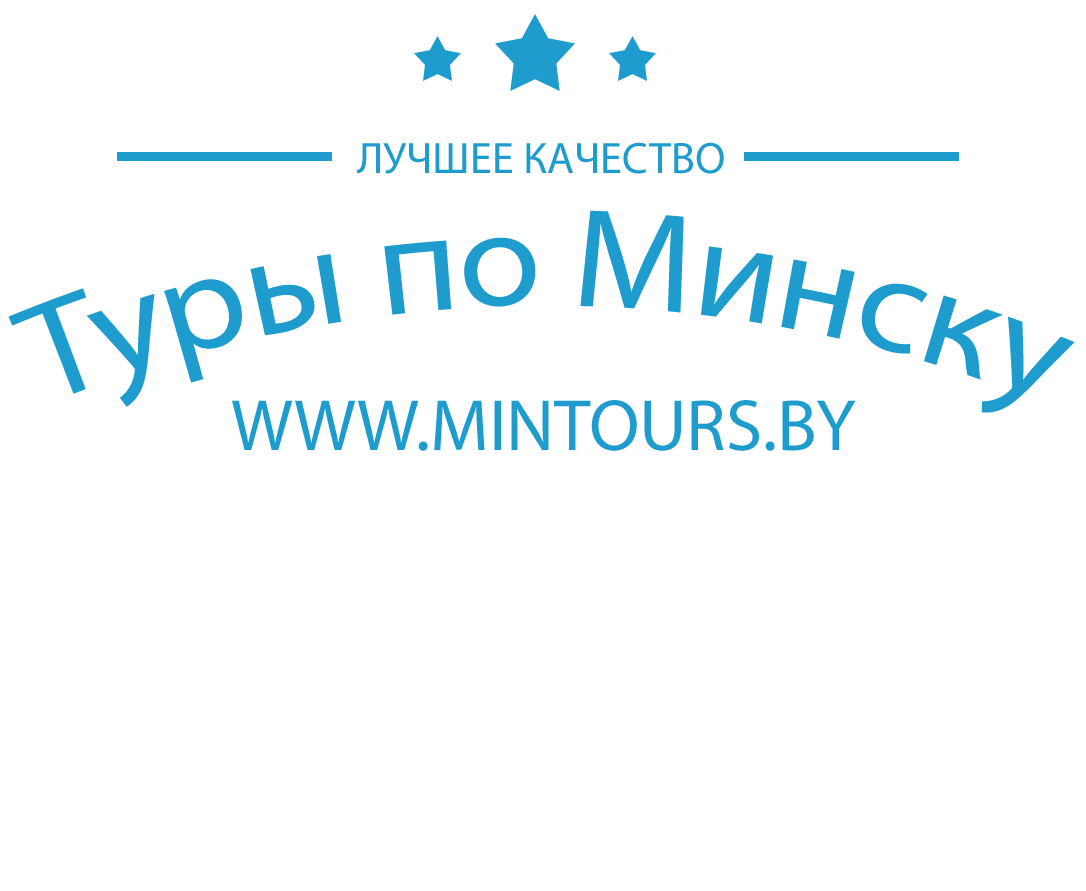
<style>
.page{position:relative;width:1086px;height:891px;background:#ffffff}
.page>*{position:absolute;margin:0}
.t1{font:44.2px "MyriadPro-Regular";color:#1d9ccd}
.t2{font:140px "MyriadPro-Regular";color:#1d9ccd}
.t3{font:73.2px "MyriadPro-Regular";color:#1d9ccd}
</style>
<div class="page">
<p class="t1" style="left:356px;top:142px;width:368px;height:32px">ЛУЧШЕЕ КАЧЕСТВО</p>
<p class="t2" style="left:8px;top:210px;width:1067px;height:203px">Туры по Минску</p>
<p class="t3" style="left:232px;top:400px;width:624px;height:51px">WWW.MINTOURS.BY</p>
</div>
